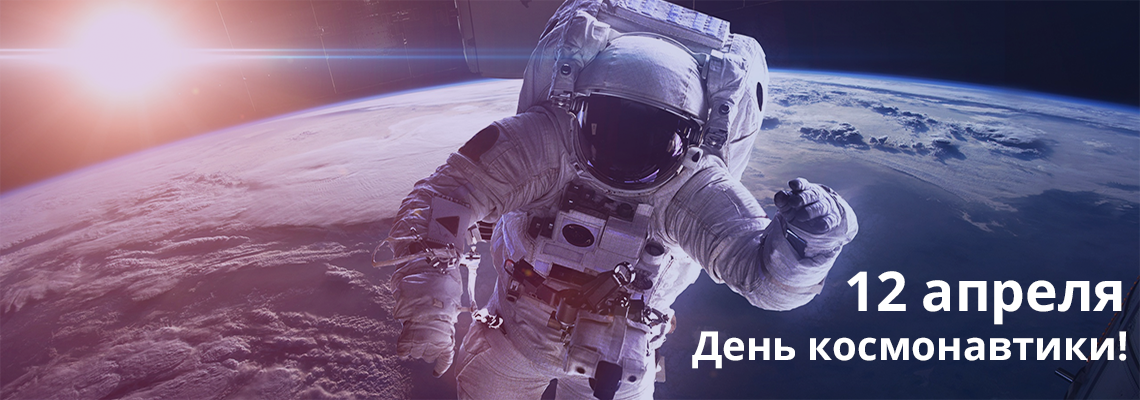
<style>
.page{position:relative;width:1140px;height:400px}
.page>*{position:absolute;margin:0}
.t1{font:55px "OpenSans-Bold";color:#ffffff}
.t2{font:40px "OpenSans-Bold";color:#ffffff}
</style>
<div class="page">
<p class="t1" style="left:847px;top:271px;width:275px;height:54px">12 апреля</p>
<p class="t2" style="left:692px;top:331px;width:435px;height:38px">День космонавтики!</p>
</div>
